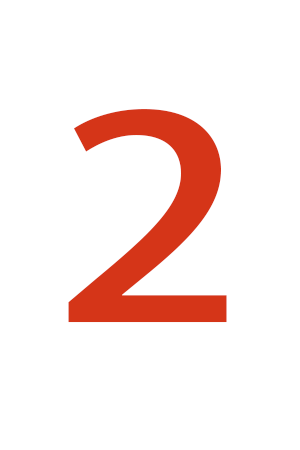
<style>
.page{position:relative;width:300px;height:450px;background:#ffffff}
.page>*{position:absolute;margin:0}
.t1{font:277.8px "AdobeFanHeitiStd-Bold";color:#d53518;scale:1.24 1}
</style>
<div class="page">
<p class="t1" style="left:68px;top:109px;width:159px;height:214px">2</p>
</div>
